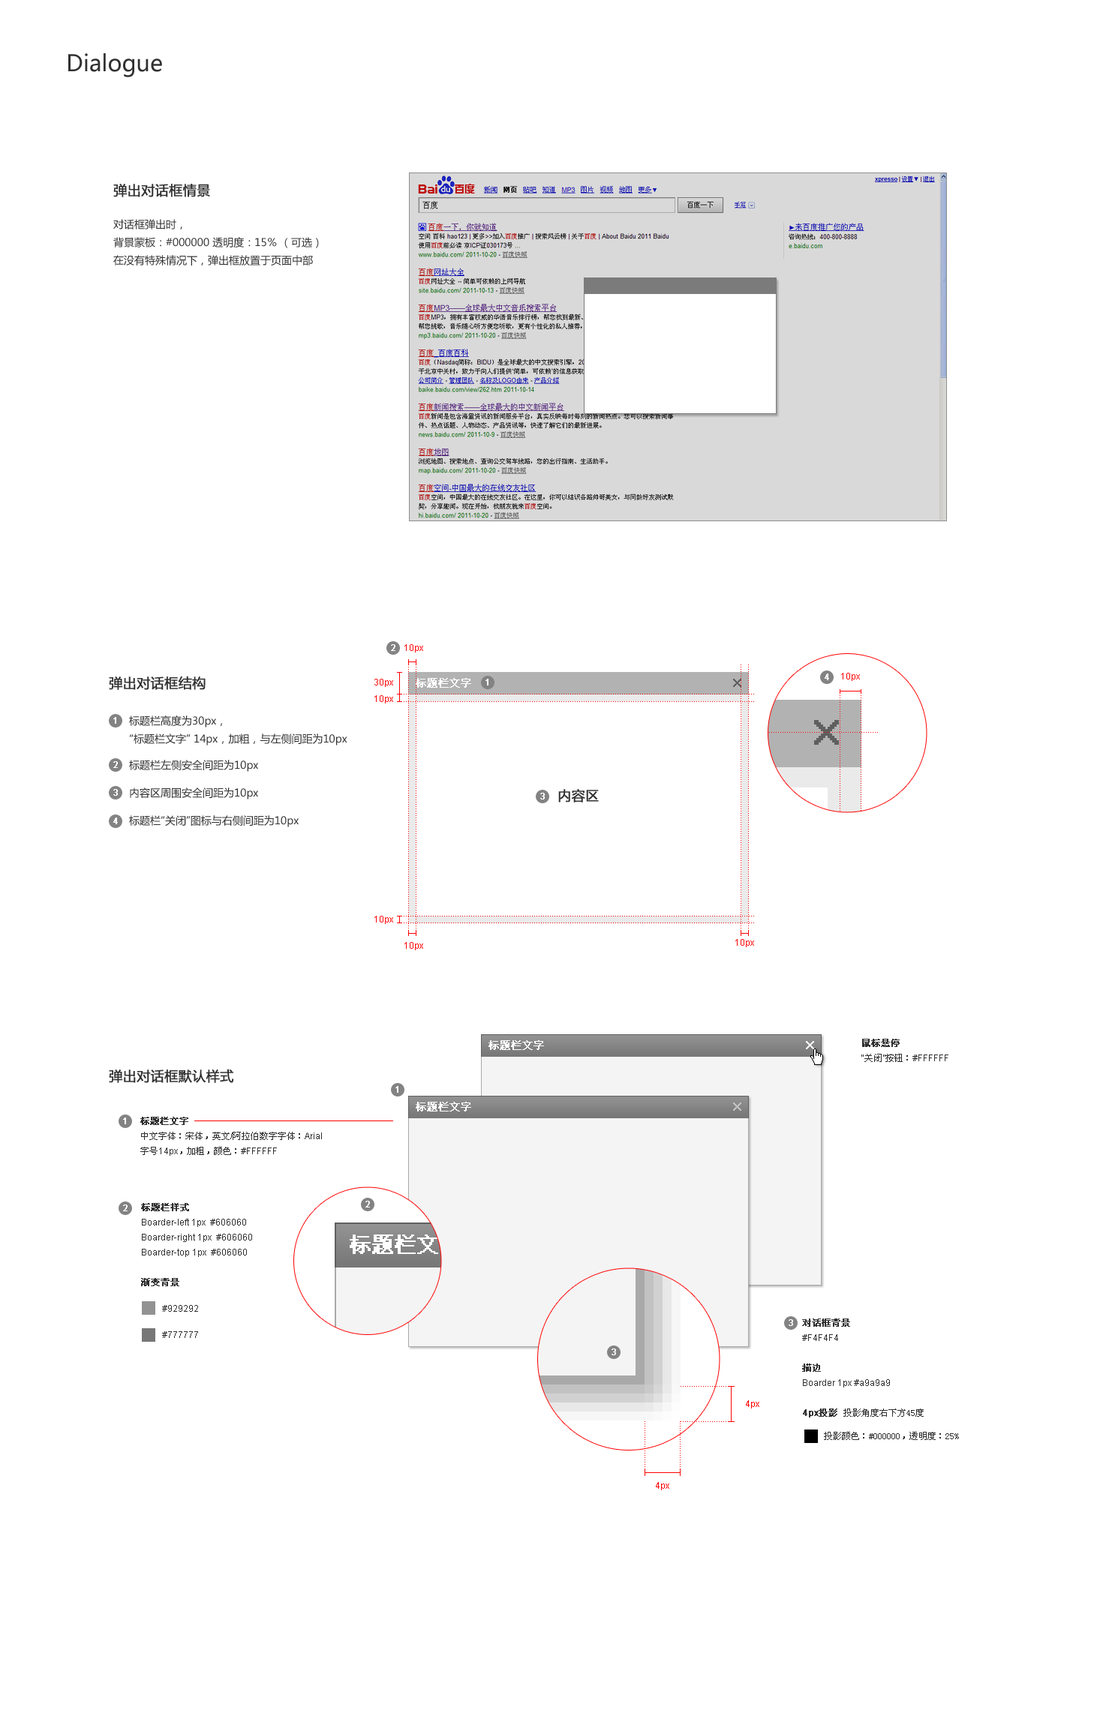
<style>
.page{position:relative;width:1112px;height:1725px;background:#ffffff}
.page>*{position:absolute;margin:0}
.t1{font:22.5px "MicrosoftYaHei";color:#303030}
.t2{font:13.5px "MicrosoftYaHei";color:#303030;font-weight:bold}
.t3{font:10.5px/18px "MicrosoftYaHei";color:#303030}
.t4{font:9px "ArialMT";color:#ffffff;font-weight:bold}
.t5{font:9px "ArialMT";color:#ff0000}
.t6{font:10.5px "NSimSun";color:#ffffff;font-weight:bold}
.t7{font:10.5px "MicrosoftYaHei";color:#303030}
.t8{font:9px/15px "ArialMT";color:#303030}
.t9{font:9px/15px "NSimSun";color:#303030;font-weight:bold}
.t10{font:9px/15px "NSimSun";color:#303030}
.t11{font:9px "ArialMT";color:#303030}
.t12{font:9px/15px "STHeitiSC-Light";color:#303030;font-weight:bold}
.t13{font:9px/15px "ArialMT";color:#303030;font-weight:bold}
.t14{font:9px "NSimSun";color:#303030}
</style>
<div class="page">
<p class="t1" style="left:68px;top:53px;width:94px;height:24px">Dialogue</p>
<p class="t2" style="left:113px;top:184px;width:97px;height:13px">弹出对话框情景</p>
<p class="t3" style="left:113px;top:219px;width:206px;height:47px">对话框弹出时，<br>背景蒙板：#000000 透明度：15％ （可选）<br>在没有特殊情况下，弹出框放置于页面中部</p>
<p class="t4" style="left:391px;top:644px;width:4px;height:7px">2</p>
<p class="t5" style="left:404px;top:644px;width:19px;height:8px">10px</p>
<p class="t2" style="left:109px;top:676px;width:97px;height:14px">弹出对话框结构</p>
<p class="t6" style="left:416px;top:678px;width:55px;height:10px">标题栏文字</p>
<p class="t4" style="left:824px;top:674px;width:5px;height:6px">4</p>
<p class="t5" style="left:841px;top:673px;width:19px;height:8px">10px</p>
<p class="t5" style="left:374px;top:679px;width:19px;height:8px">30px</p>
<p class="t4" style="left:485px;top:679px;width:3px;height:7px">1</p>
<p class="t5" style="left:374px;top:695px;width:19px;height:9px">10px</p>
<p class="t4" style="left:113px;top:717px;width:3px;height:7px">1</p>
<p class="t3" style="left:129px;top:716px;width:218px;height:30px">标题栏高度为30px，<br>“标题栏文字” 14px，加粗，与左侧间距为10px</p>
<p class="t4" style="left:113px;top:761px;width:5px;height:7px">2</p>
<p class="t7" style="left:129px;top:760px;width:129px;height:12px">标题栏左侧安全间距为10px</p>
<p class="t4" style="left:113px;top:789px;width:5px;height:7px">3</p>
<p class="t7" style="left:130px;top:788px;width:128px;height:12px">内容区周围安全间距为10px</p>
<p class="t4" style="left:540px;top:793px;width:4px;height:7px">3</p>
<p class="t2" style="left:558px;top:789px;width:40px;height:13px">内容区</p>
<p class="t4" style="left:113px;top:818px;width:5px;height:6px">4</p>
<p class="t7" style="left:129px;top:815px;width:169px;height:12px">标题栏“关闭”图标与右侧间距为10px</p>
<p class="t5" style="left:374px;top:916px;width:19px;height:8px">10px</p>
<p class="t5" style="left:404px;top:942px;width:19px;height:8px">10px</p>
<p class="t5" style="left:735px;top:939px;width:19px;height:8px">10px</p>
<p class="t6" style="left:488px;top:1040px;width:56px;height:10px">标题栏文字</p>
<p class="t8" style="left:861px;top:1039px;width:87px;height:23px"><span class="t9">鼠标悬停<br></span>“<span class="t10">关闭</span>”<span class="t10">按钮：</span>#FFFFFF</p>
<p class="t2" style="left:109px;top:1069px;width:125px;height:14px">弹出对话框默认样式</p>
<p class="t4" style="left:395px;top:1086px;width:3px;height:7px">1</p>
<p class="t6" style="left:416px;top:1102px;width:55px;height:10px">标题栏文字</p>
<p class="t4" style="left:123px;top:1118px;width:3px;height:6px">1</p>
<p class="t10" style="left:140px;top:1117px;width:182px;height:39px"><span class="t9">标题栏文字<br></span>中文字体：宋体，英文<span class="t8">/</span>阿拉伯数字字体：<span class="t8">Arial<br></span>字号<span class="t8">14px</span>，加粗，颜色：<span class="t8">#FFFFFF</span></p>
<p class="t4" style="left:123px;top:1204px;width:5px;height:7px">2</p>
<p class="t8" style="left:141px;top:1203px;width:111px;height:83px"><span class="t9">标题栏样式<br></span>Boarder-left 1px  #606060<br>Boarder-right 1px  #606060 <br>Boarder-top 1px  #606060<br><br><span class="t9">渐变背景</span></p>
<p class="t4" style="left:365px;top:1201px;width:5px;height:7px">2</p>
<p class="t11" style="left:162px;top:1305px;width:36px;height:7px">#929292</p>
<p class="t4" style="left:788px;top:1319px;width:5px;height:7px">3</p>
<p class="t8" style="left:802px;top:1318px;width:121px;height:100px"><span class="t9">对话框背景<br></span>#F4F4F4<br><br><span class="t12">描边<br></span>Boarder 1px #a9a9a9<br><br><span class="t13">4px</span><span class="t9">投影 </span><span class="t10">投影角度右下方45度</span></p>
<p class="t11" style="left:162px;top:1331px;width:36px;height:7px">#777777</p>
<p class="t4" style="left:611px;top:1348px;width:5px;height:7px">3</p>
<p class="t5" style="left:746px;top:1400px;width:13px;height:8px">4px</p>
<p class="t14" style="left:824px;top:1432px;width:134px;height:8px">投影颜色：#000000，透明度：25%</p>
<p class="t5" style="left:656px;top:1482px;width:13px;height:8px">4px</p>
</div>
